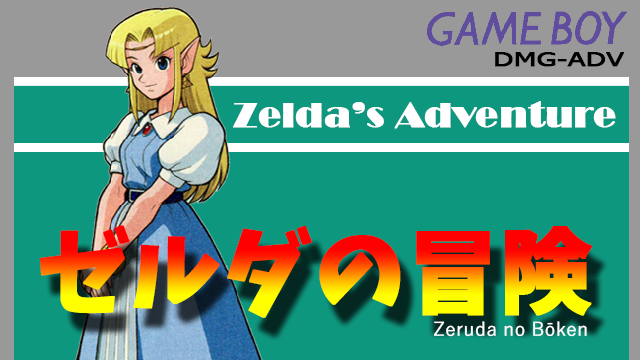
<style>
.page{position:relative;width:640px;height:360px;background:#0e977f}
.page>*{position:absolute;margin:0}
.t1{font:18.6px "Tahoma";color:#000000;font-weight:bold;scale:1.56 1}
.t2{font:35.9px "Broadway";color:#ffffff;font-weight:bold;scale:1.03 1}
.t3{font:92.5px "Keifont";font-weight:bold}
.t4{font:18.9px "YuGothic-Regular";color:#ffffff;font-weight:bold}
</style>
<div class="page">
<p class="t1" style="left:495px;top:52px;width:130px;height:15px">DMG-ADV</p>
<p class="t2" style="left:233px;top:101px;width:383px;height:28px">Zelda’s Adventure</p>
<p class="t3" style="left:40px;top:225px;width:552px;height:93px">ゼルダの冒険</p>
<p class="t4" style="left:434px;top:321px;width:153px;height:16px">Zeruda no Bōken</p>
</div>
